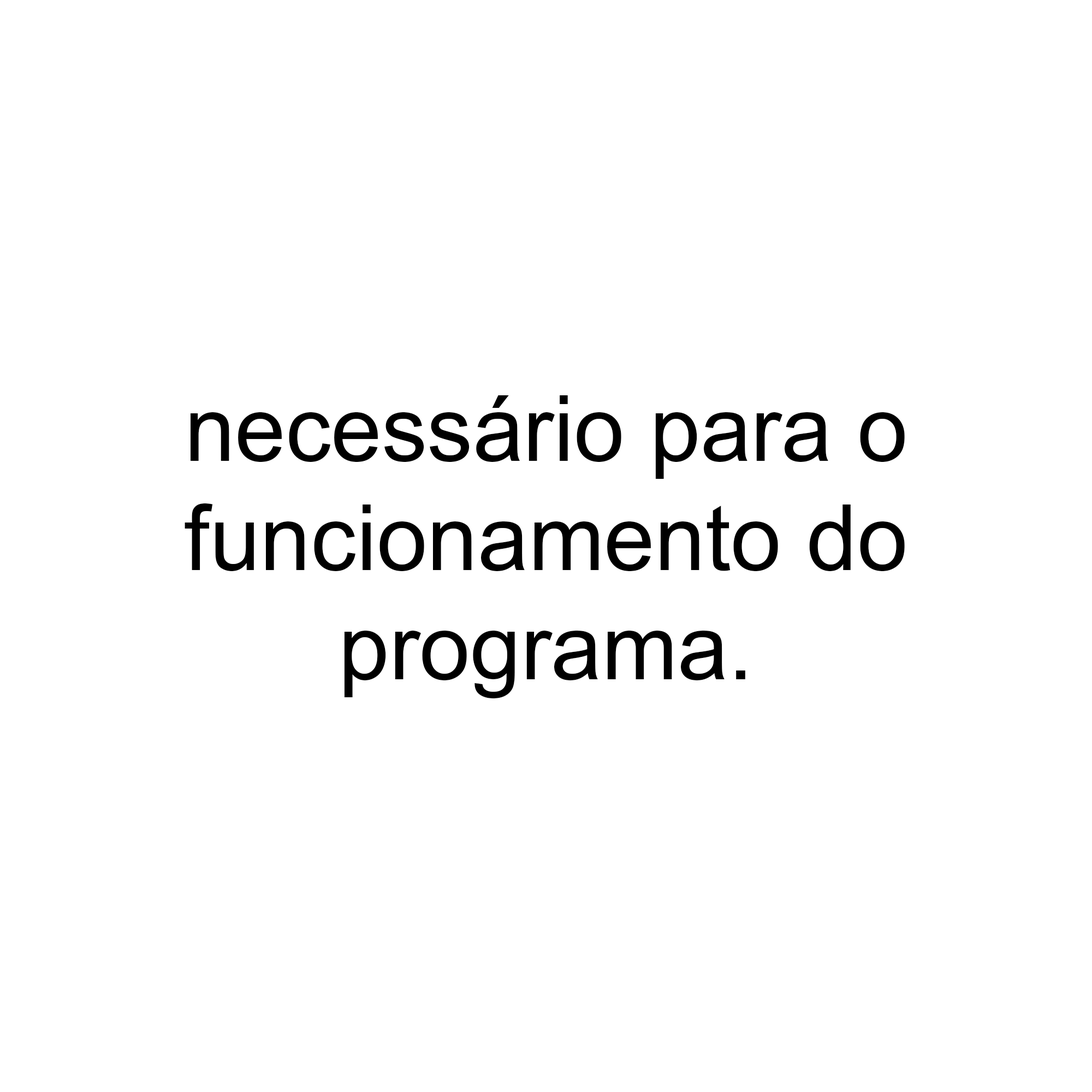
<style>
.page{position:relative;width:1092px;height:1092px;background:#ffffff}
.page>*{position:absolute;margin:0}
.t1{font:91px "ArialMT";color:#000000}
</style>
<div class="page">
<p class="t1" style="left:185px;top:395px;width:720px;height:303px;text-align:center">necessário para o<br>funcionamento do<br>programa.</p>
</div>
